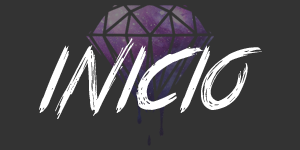
<style>
.page{position:relative;width:300px;height:150px;background:#333333}
.page>*{position:absolute;margin:0}
.t1{font:89.1px "TrueLies";color:#ffffff}
</style>
<div class="page">
<p class="t1" style="left:39px;top:38px;width:223px;height:81px">inicio</p>
</div>
